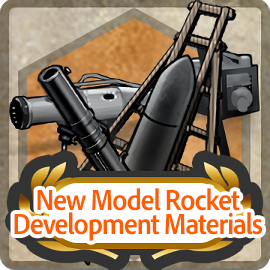
<style>
.page{position:relative;width:270px;height:270px}
.page>*{position:absolute;margin:0}
.t1{font:30px/24px "AdobeClean-Bold";letter-spacing:-0.04em;color:#ff5d00;scale:0.9 1}
</style>
<div class="page">
<p class="t1" style="left:14px;top:188px;width:248px;height:53px;text-align:center">New Model Rocket<br>Development Materials</p>
</div>
